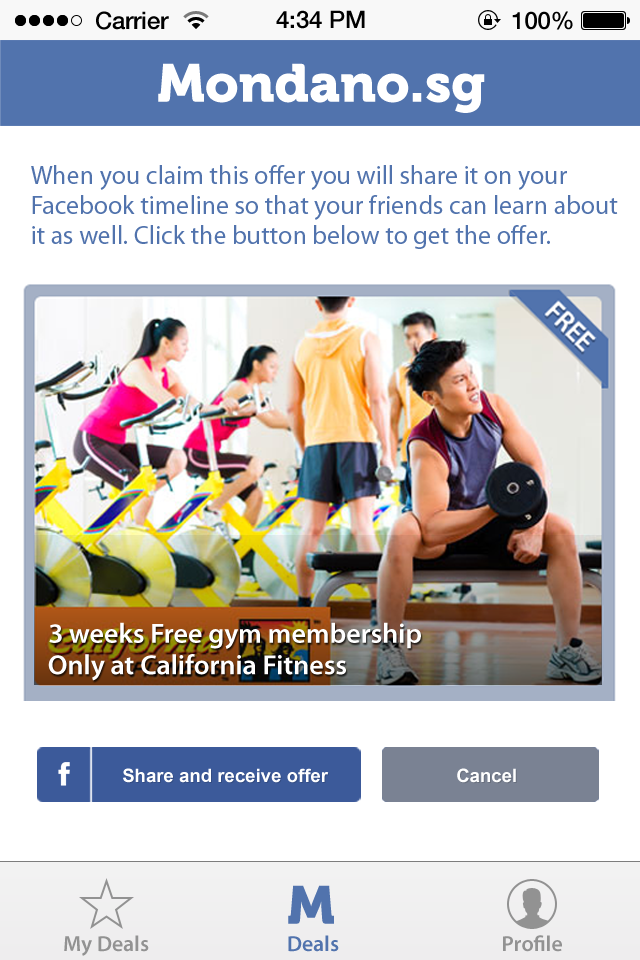
<style>
.page{position:relative;width:640px;height:960px;background:#ffffff}
.page>*{position:absolute;margin:0}
.t1{font:24px "HelveticaNeue-Medium";color:#000000}
.t2{font:53.3px "Museo900-Regular";color:#ffffff}
.t3{font:26px/30px "MyriadPro-Regular";color:#5173ad}
.t4{font:28px "MyriadPro-Semibold";color:#ffffff}
.t5{font:26px "Utsaah-Bold";color:#ffffff}
.t6{font:53.3px "Museo900-Regular";color:#5173ad}
.t7{font:22px "MyriadPro-Semibold";color:#929292}
.t8{font:22px "MyriadPro-Semibold";color:#5173ad}
</style>
<div class="page">
<p class="t1" style="left:96px;top:11px;width:73px;height:19px">Carrier</p>
<p class="t1" style="left:276px;top:10px;width:89px;height:19px">4:34 PM</p>
<p class="t1" style="left:512px;top:11px;width:61px;height:19px">100%</p>
<p class="t2" style="left:158px;top:63px;width:327px;height:50px">Mondano.sg</p>
<p class="t3" style="left:31px;top:165px;width:587px;height:84px">When you claim this offer you will share it on your Facebook timeline so that your friends can learn about it as well. Click the button below to get the offer.</p>
<p class="t4" style="left:49px;top:622px;width:372px;height:27px">3 weeks Free gym membership</p>
<p class="t4" style="left:48px;top:654px;width:298px;height:27px">Only at California Fitness</p>
<p class="t5" style="left:123px;top:768px;width:206px;height:15px">Share and receive offer</p>
<p class="t5" style="left:457px;top:768px;width:59px;height:15px">Cancel</p>
<p class="t6" style="left:288px;top:885px;width:46px;height:39px">M</p>
<p class="t7" style="left:64px;top:935px;width:85px;height:21px">My Deals</p>
<p class="t8" style="left:288px;top:935px;width:51px;height:17px">Deals</p>
<p class="t7" style="left:503px;top:935px;width:59px;height:17px">Profile</p>
</div>
